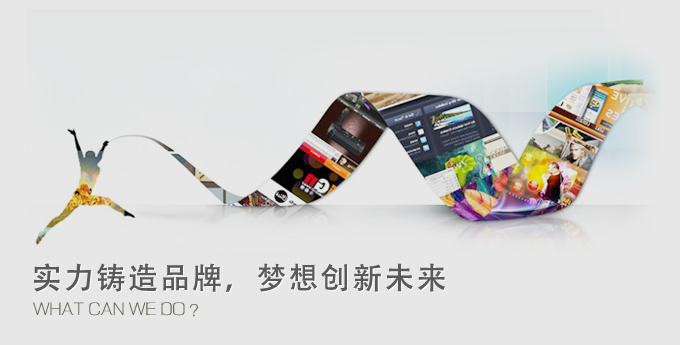
<style>
.page{position:relative;width:680px;height:345px;background:#e7e7e7}
.page>*{position:absolute;margin:0}
.t1{font:30px "AdobeHeitiStd-Regular";letter-spacing:0.068em;color:#595959}
.t2{font:30px "AdobeHeitiStd-Regular";letter-spacing:0.068em}
.t3{font:16.7px "FZXQJW--GB1-0";color:#6e6c60}
</style>
<div class="page">
<p class="t1" style="left:34px;top:263px;width:411px;height:29px">实力铸造品牌，梦想创新未来</p>
<p class="t2" style="left:35px;top:264px;width:411px;height:29px">实力铸造品牌，梦想创新未来</p>
<p class="t3" style="left:33px;top:302px;width:165px;height:15px">WHAT CAN WE DO ？</p>
</div>
